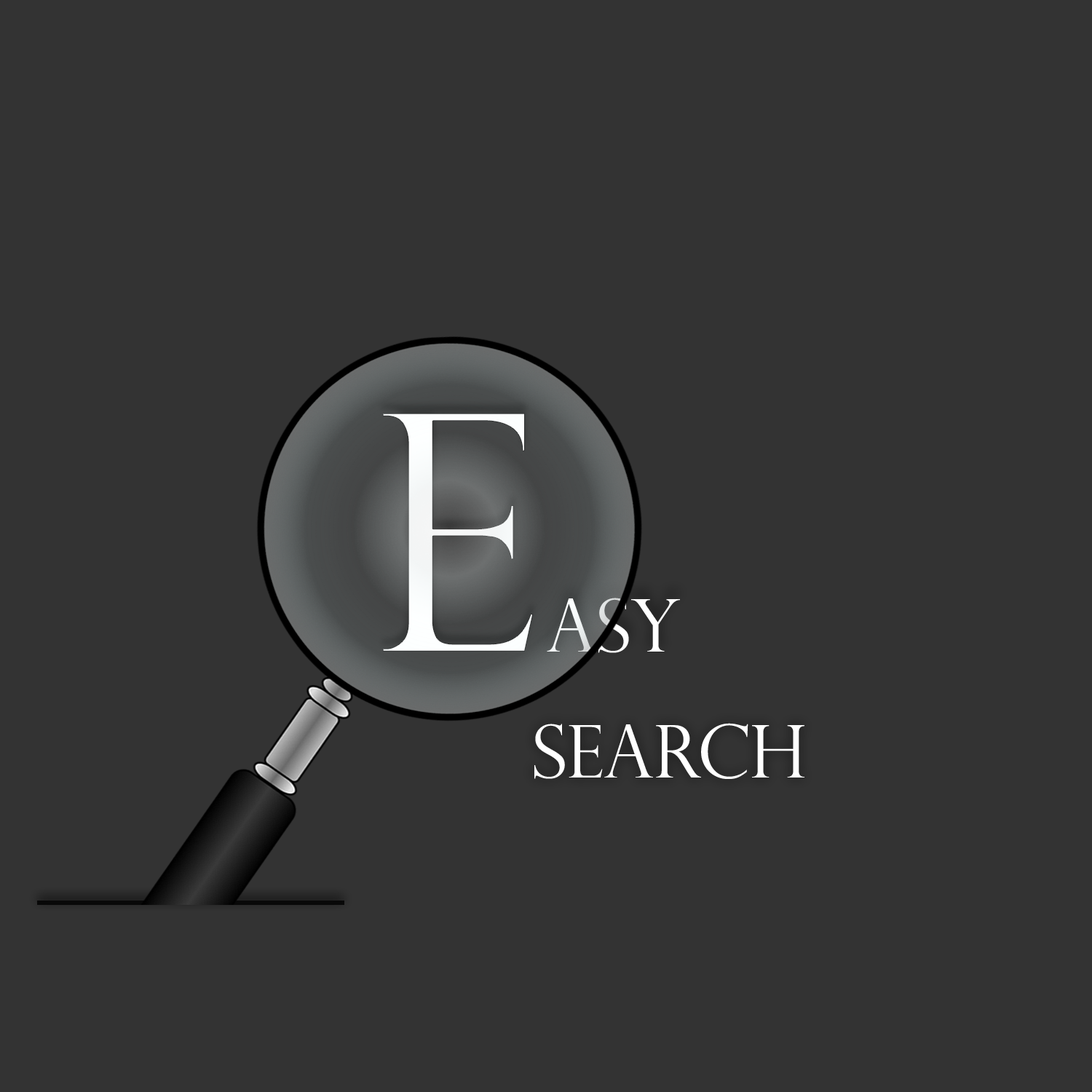
<style>
.page{position:relative;width:1092px;height:1092px;background:#333333}
.page>*{position:absolute;margin:0}
.t1{font:330.7px "PerpetuaTitlingMT-Light";color:#ffffff}
.t2{font:72.8px "PerpetuaTitlingMT-Light";color:#ffffff}
</style>
<div class="page">
<p class="t1" style="left:382px;top:413px;width:152px;height:239px">e</p>
<p class="t2" style="left:547px;top:598px;width:133px;height:55px">asy</p>
<p class="t2" style="left:534px;top:723px;width:270px;height:56px">search</p>
</div>
